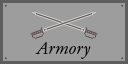
<style>
.page{position:relative;width:128px;height:64px;background:#9d9d9d}
.page>*{position:absolute;margin:0}
.t1{font:17.9px "AGaramondPro-Italic";color:#060606;scale:1.06 1}
</style>
<div class="page">
<p class="t1" style="left:35px;top:42px;width:56px;height:17px">Armory</p>
</div>
